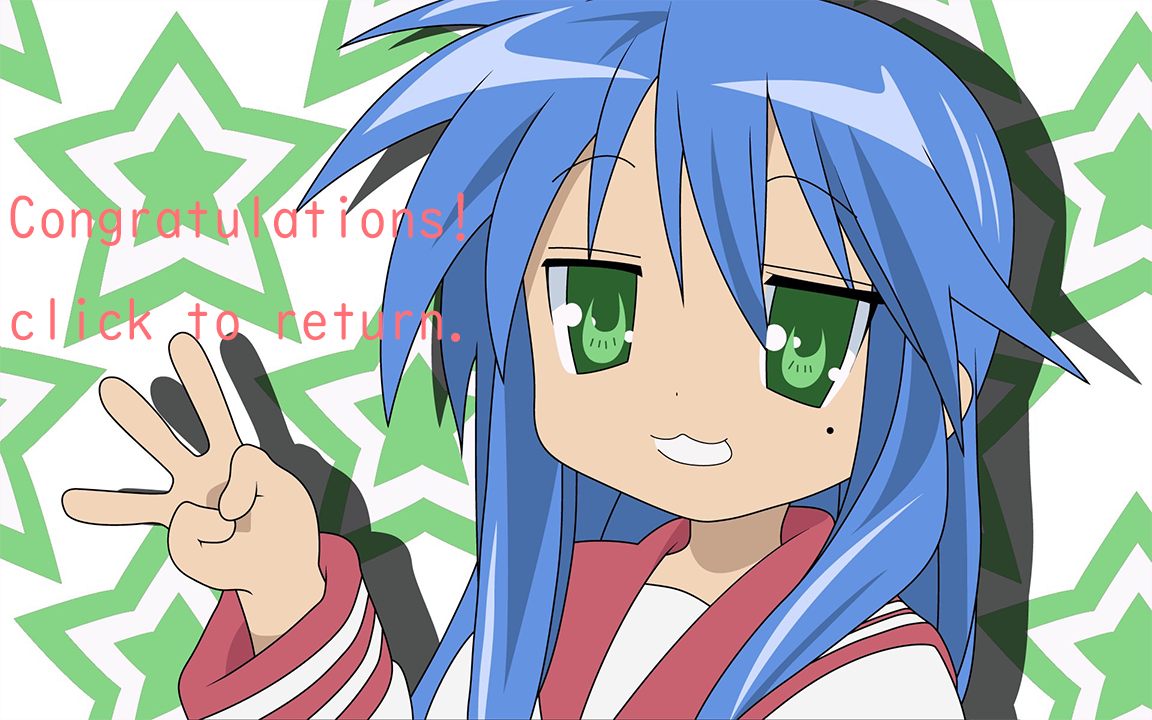
<style>
.page{position:relative;width:1152px;height:720px}
.page>*{position:absolute;margin:0}
.t1{font:58.3px "UDDigiKyokashoN-R";color:#ff6f76}
</style>
<div class="page">
<p class="t1" style="left:10px;top:192px;width:455px;height:150px;text-align:center">Congratulations!<br>click to return.</p>
</div>
